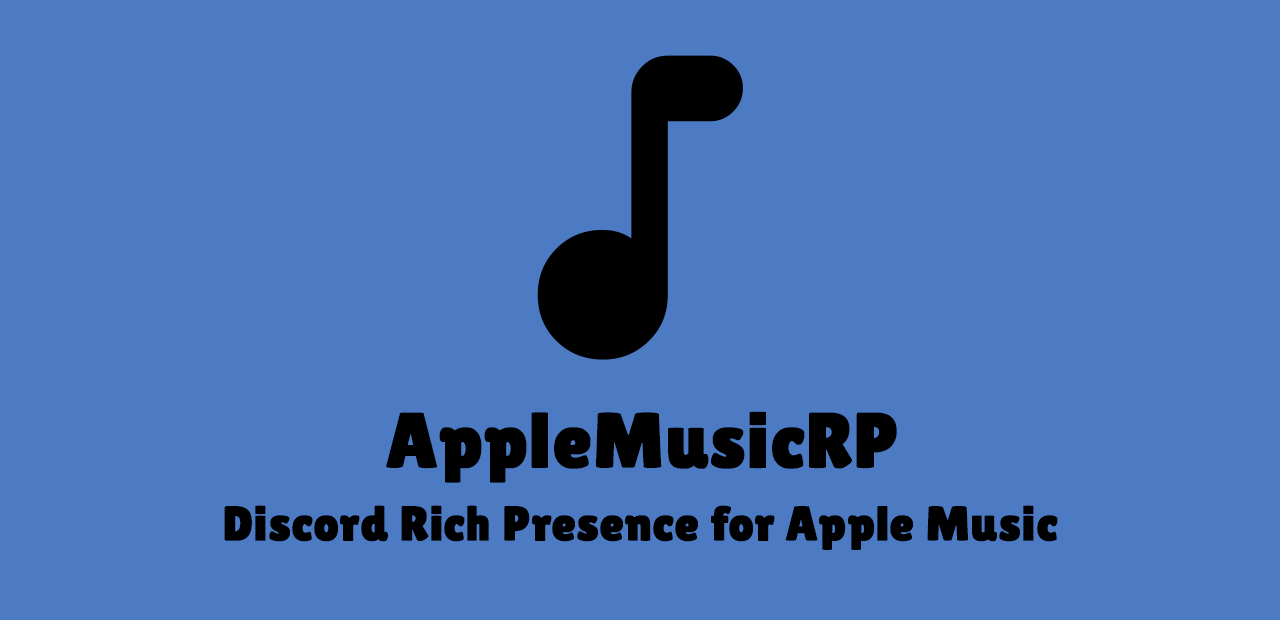
<style>
.page{position:relative;width:1280px;height:620px;background:#4c7bc4}
.page>*{position:absolute;margin:0}
.t1{font:77.9px "LilitaOne";color:#000000;font-weight:bold}
.t2{font:48.6px "LilitaOne";color:#000000;font-weight:bold}
</style>
<div class="page">
<p class="t1" style="left:386px;top:411px;width:511px;height:72px">AppleMusicRP</p>
<p class="t2" style="left:224px;top:505px;width:834px;height:45px">Discord Rich Presence for Apple Music</p>
</div>
